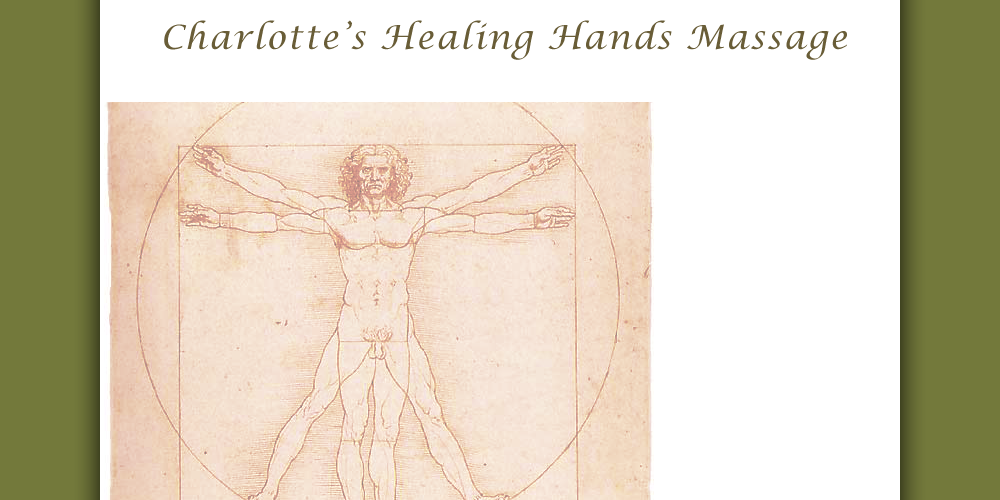
<style>
.page{position:relative;width:1000px;height:500px;background:#ffffff}
.page>*{position:absolute;margin:0}
.t1{font:33.3px "LucidaCalligraphy-Italic";letter-spacing:0.05em;color:#695d37}
</style>
<div class="page">
<p class="t1" style="left:164px;top:20px;width:683px;height:40px">Charlotte’s Healing Hands Massage</p>
</div>
